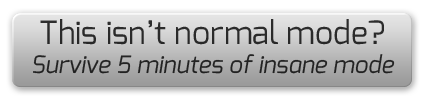
<style>
.page{position:relative;width:425px;height:100px}
.page>*{position:absolute;margin:0}
.t1{font:24px "Exo-Italic";color:#292929}
.t2{font:32px "Exo-Regular";color:#292929}
</style>
<div class="page">
<p class="t1" style="left:33px;top:19px;width:362px;height:55px;text-align:center"><span class="t2">This isn’t normal mode?<br></span>Survive 5 minutes of insane mode</p>
</div>
